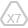
<style>
.page{position:relative;width:28px;height:28px;background:#ffffff}
.page>*{position:absolute;margin:0}
.t1{font:12px "ArialMT";color:#c8c8c8;font-variant:small-caps}
</style>
<div class="page">
<p class="t1" style="left:6px;top:14px;width:15px;height:9px">X7</p>
</div>
